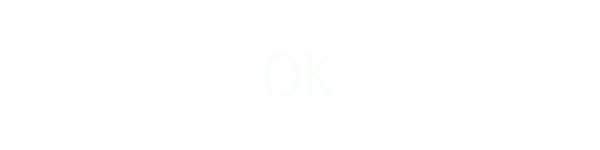
<style>
.page{position:relative;width:600px;height:150px;background:#ffffff}
.page>*{position:absolute;margin:0}
.t1{font:63px "SeN-CM";color:#f8fff9}
</style>
<div class="page">
<p class="t1" style="left:264px;top:51px;width:72px;height:47px">OK</p>
</div>
